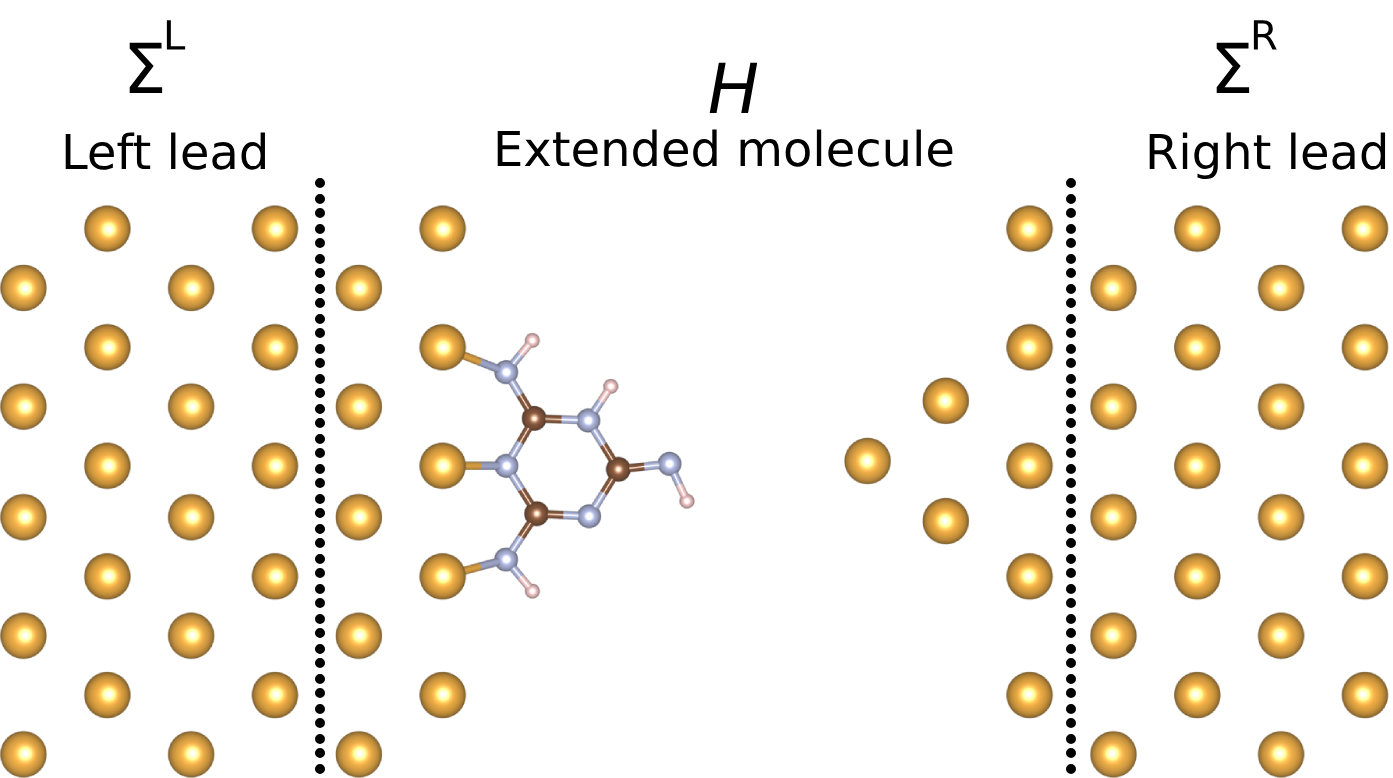
<style>
.page{position:relative;width:1393px;height:778px;background:#ffffff}
.page>*{position:absolute;margin:0}
.t1{font:69px "DejaVuSans";color:#000000}
.t2{font:69px "DejaVuSans";color:#000000;font-style:italic}
.t3{font:48px "DejaVuSans";color:#000000}
</style>
<div class="page">
<p class="t1" style="left:166px;top:20px;width:20px;height:30px">L</p>
<p class="t1" style="left:1253px;top:20px;width:24px;height:30px">R</p>
<p class="t1" style="left:129px;top:42px;width:34px;height:51px">Σ</p>
<p class="t1" style="left:1216px;top:42px;width:34px;height:51px">Σ</p>
<p class="t2" style="left:709px;top:62px;width:49px;height:51px"><span class="t1"> </span>H</p>
<p class="t3" style="left:65px;top:132px;width:200px;height:38px">Left lead</p>
<p class="t3" style="left:497px;top:129px;width:456px;height:38px">Extended molecule</p>
<p class="t3" style="left:1149px;top:132px;width:237px;height:47px">Right lead</p>
</div>
